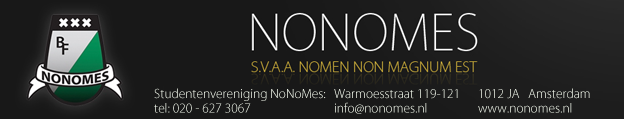
<style>
.page{position:relative;width:624px;height:119px;background:#181818}
.page>*{position:absolute;margin:0}
.t1{font:12px "KozGoPro-Light"}
</style>
<div class="page">
<p class="t1" style="left:154px;top:88px;width:436px;height:26px">Studentenvereniging NoNoMes:   Warmoesstraat 119-121 1012 JA   Amsterdam<br>tel: 020 - 627 3067   info@nonomes.nl         www.nonomes.nl</p>
</div>
